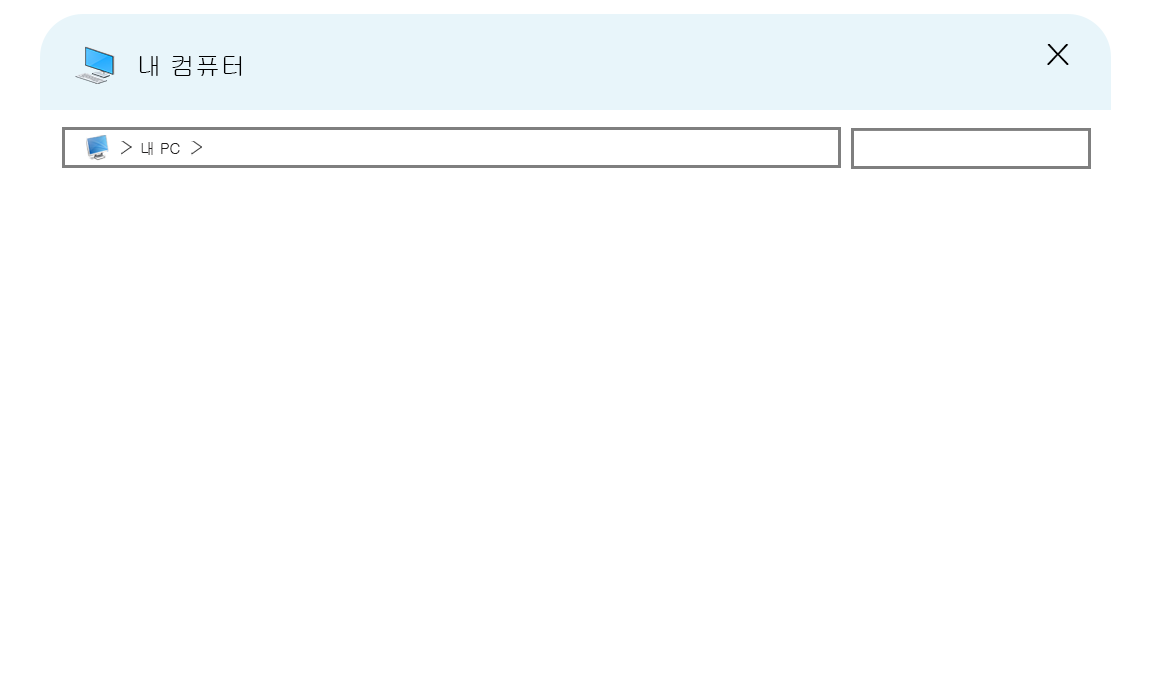
<style>
.page{position:relative;width:1150px;height:700px;background:#ffffff}
.page>*{position:absolute;margin:0}
.t1{font:28.7px "Gulim";color:#000000;scale:1.41 1}
.t2{font:25.1px "Gulim";color:#000000}
.t3{font:15.1px "Gulim";color:#222020}
</style>
<div class="page">
<p class="t1" style="left:1047px;top:44px;width:22px;height:21px">X</p>
<p class="t2" style="left:139px;top:56px;width:103px;height:20px">내 컴퓨터</p>
<p class="t3" style="left:141px;top:142px;width:39px;height:13px">내 PC</p>
</div>
